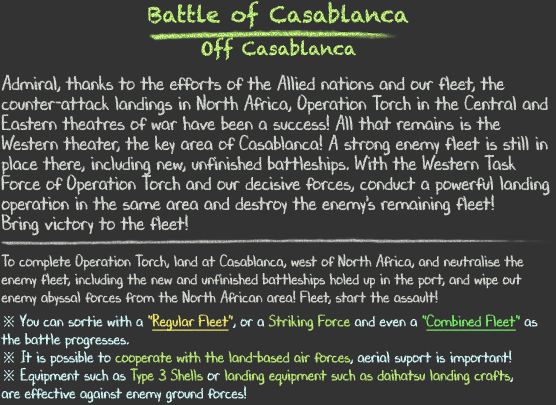
<style>
.page{position:relative;width:556px;height:405px;background:#333333}
.page>*{position:absolute;margin:0}
.t1{font:22px/36px "Chalkduster"}
.t2{font:18px/36px "Chalkduster"}
.t3{font:20px/20px "DJBChalkItUp";color:#d9ded6;scale:0.9 1}
.t4{font:16px/18px "DJBChalkItUp";color:#d9ded6;scale:0.9 1}
.t5{font:16px/24px "DJBChalkItUp";color:#d9ded6;scale:0.9 1}
.t6{font:16px/18px "TimesNewRomanPSMT";color:#d7feff;scale:0.9 1}
.t7{font:16px/18px "DJBChalkItUp";color:#d7feff;scale:0.9 1}
.t8{font:16px/18px "DJBChalkItUp";color:#f5ed68;scale:0.9 1}
.t9{font:16px/18px "DJBChalkItUp";color:#f5ed68;text-decoration:underline;scale:0.9 1}
.t10{font:16px/18px "DJBChalkItUp";color:#bdef78;scale:0.9 1}
.t11{font:16px/18px "DJBChalkItUp";color:#7bf26b;scale:0.9 1}
.t12{font:16px/18px "DJBChalkItUp";color:#7bf26b;text-decoration:underline;scale:0.9 1}
</style>
<div class="page">
<p class="t1" style="left:148px;top:1px;width:261px;height:59px;text-align:center">Battle of Casablanca<br><span class="t2">Off Casablanca</span></p>
<p class="t3" style="left:1px;top:74px;width:549px;height:329px">Admiral, thanks to the efforts of the Allied nations and our fleet, the<br>counter-attack landings in North Africa, Operation Torch in the Central and<br>Eastern theatres of war have been a success! All that remains is the<br>Western theater, the key area of Casablanca! A strong enemy fleet is still in<br>place there, including new, unfinished battleships. With the Western Task<br>Force of Operation Torch and our decisive forces, conduct a powerful landing<br>operation in the same area and destroy the enemy's remaining fleet!<br>Bring victory to the fleet!<br><br><span class="t4">To complete Operation Torch, land at Casablanca, west of North Africa, and neutralise the<br>enemy fleet, including the new and unfinished battleships holed up in the port, and wipe out<br></span><span class="t5">enemy abyssal forces from the North African area! Fleet, start the assault!<br></span><span class="t6">※ </span><span class="t7">You can sortie with a </span><span class="t8">"</span><span class="t9">Regular Fleet</span><span class="t8">"</span><span class="t7">, or a </span><span class="t10">Striking Force</span><span class="t7"> and even a </span><span class="t11">"</span><span class="t12">Combined Fleet</span><span class="t11">" </span><span class="t7">as<br>the battle progresses.<br></span><span class="t6">※</span><span class="t7"> It is possible to </span><span class="t10">cooperate with the land-based air forces</span><span class="t7">, aerial suport is important!<br></span><span class="t6">※</span><span class="t7"> Equipment such as </span><span class="t10">Type 3 Shells</span><span class="t7"> or </span><span class="t10">landing equipment such as daihatsu landing crafts</span><span class="t7">,<br>are effective against enemy ground forces!</span></p>
</div>
